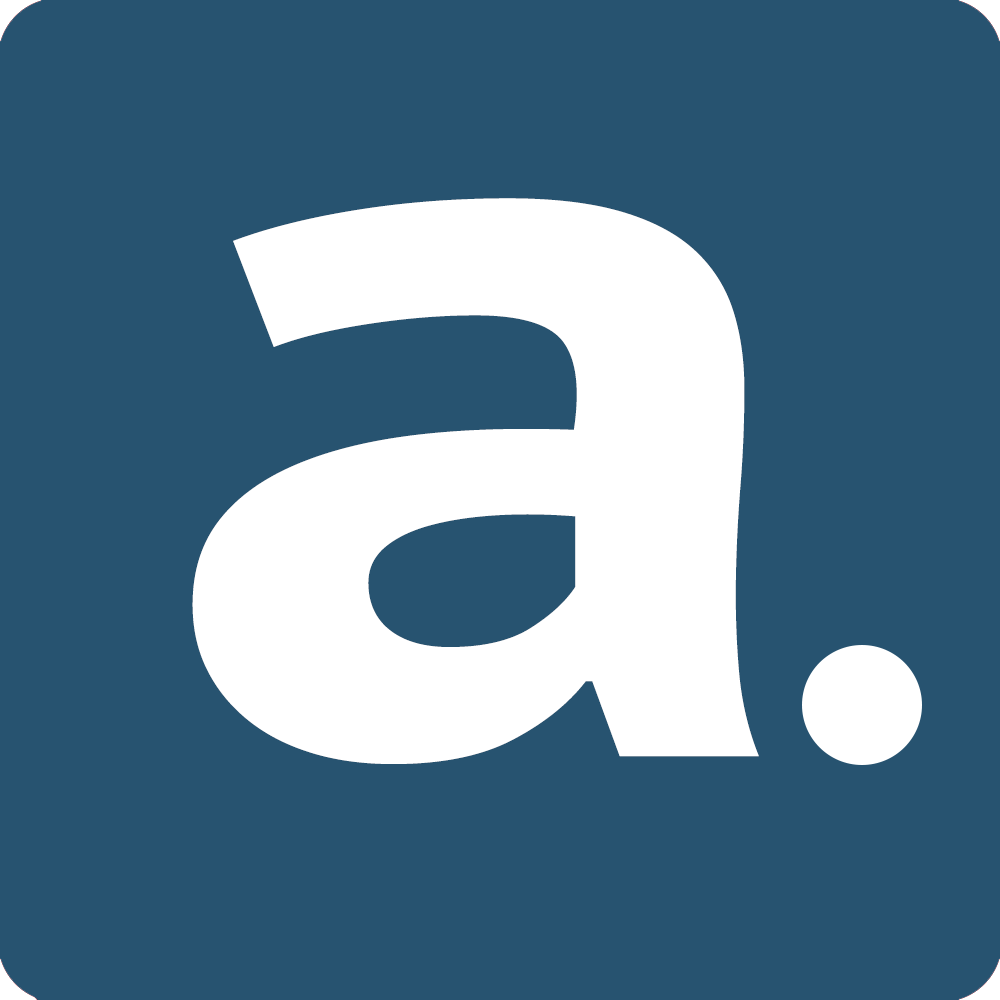
<style>
.page{position:relative;width:1000px;height:1000px;background:#275370}
.page>*{position:absolute;margin:0}
.t1{font:1091.7px "PTSans-Bold";color:#ffffff;scale:1.2 1}
</style>
<div class="page">
<p class="t1" style="left:192px;top:198px;width:567px;height:566px">a</p>
</div>
